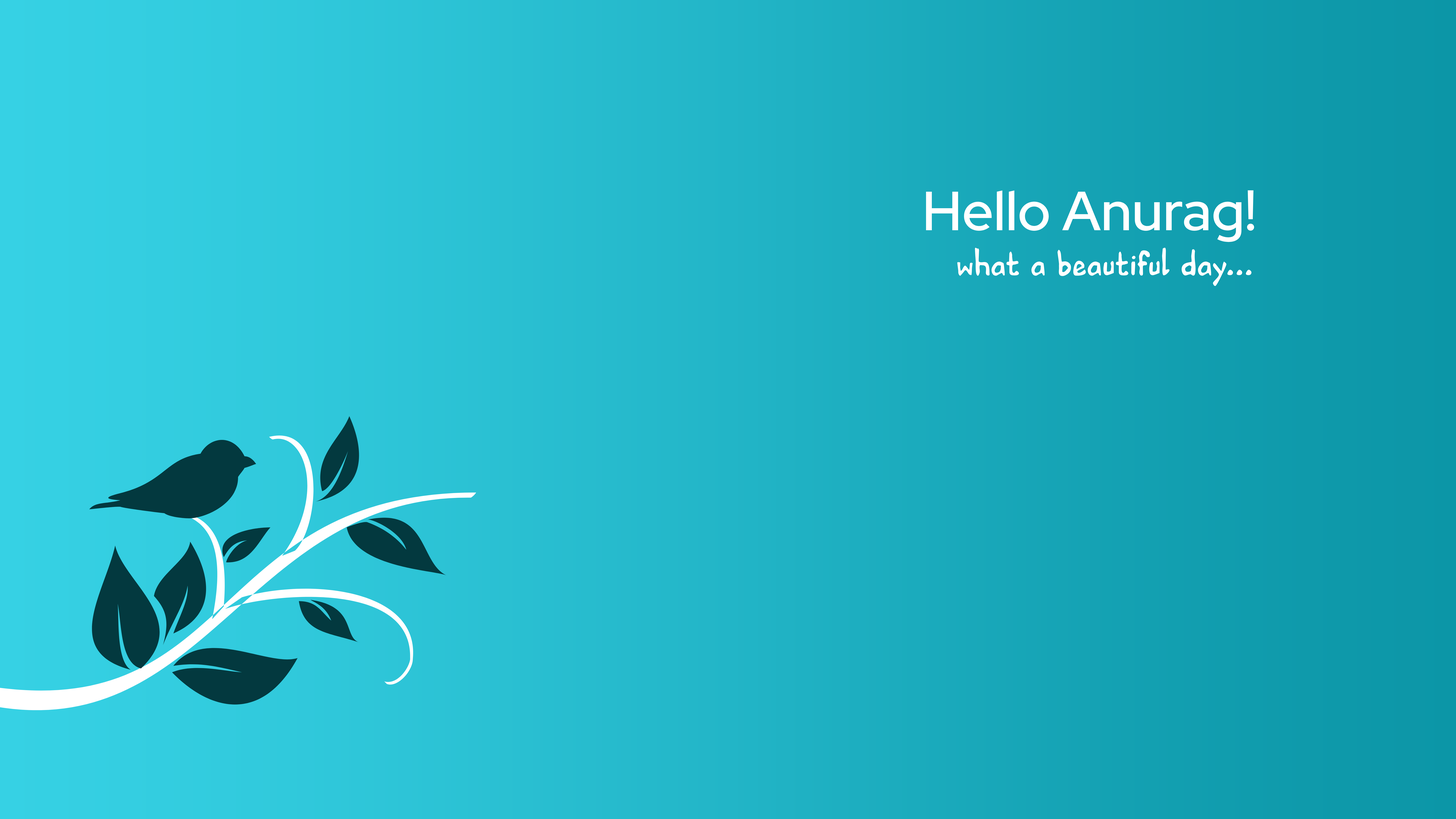
<style>
.page{position:relative;width:1456px;height:819px}
.page>*{position:absolute;margin:0}
.t1{font:55px "RedHatDisplay-Medium";color:#ffffff}
.t2{font:36.4px "HVDEdding780-Normal";color:#ffffff}
</style>
<div class="page">
<p class="t1" style="left:926px;top:190px;width:328px;height:52px">Hello Anurag!</p>
<p class="t2" style="left:957px;top:248px;width:295px;height:38px">what a beautiful day...</p>
</div>
